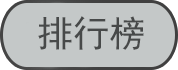
<style>
.page{position:relative;width:178px;height:70px;background:#c4c8c8}
.page>*{position:absolute;margin:0}
.t1{font:36px "SimHei";color:#474949}
</style>
<div class="page">
<p class="t1" style="left:38px;top:16px;width:106px;height:34px">排行榜</p>
</div>
